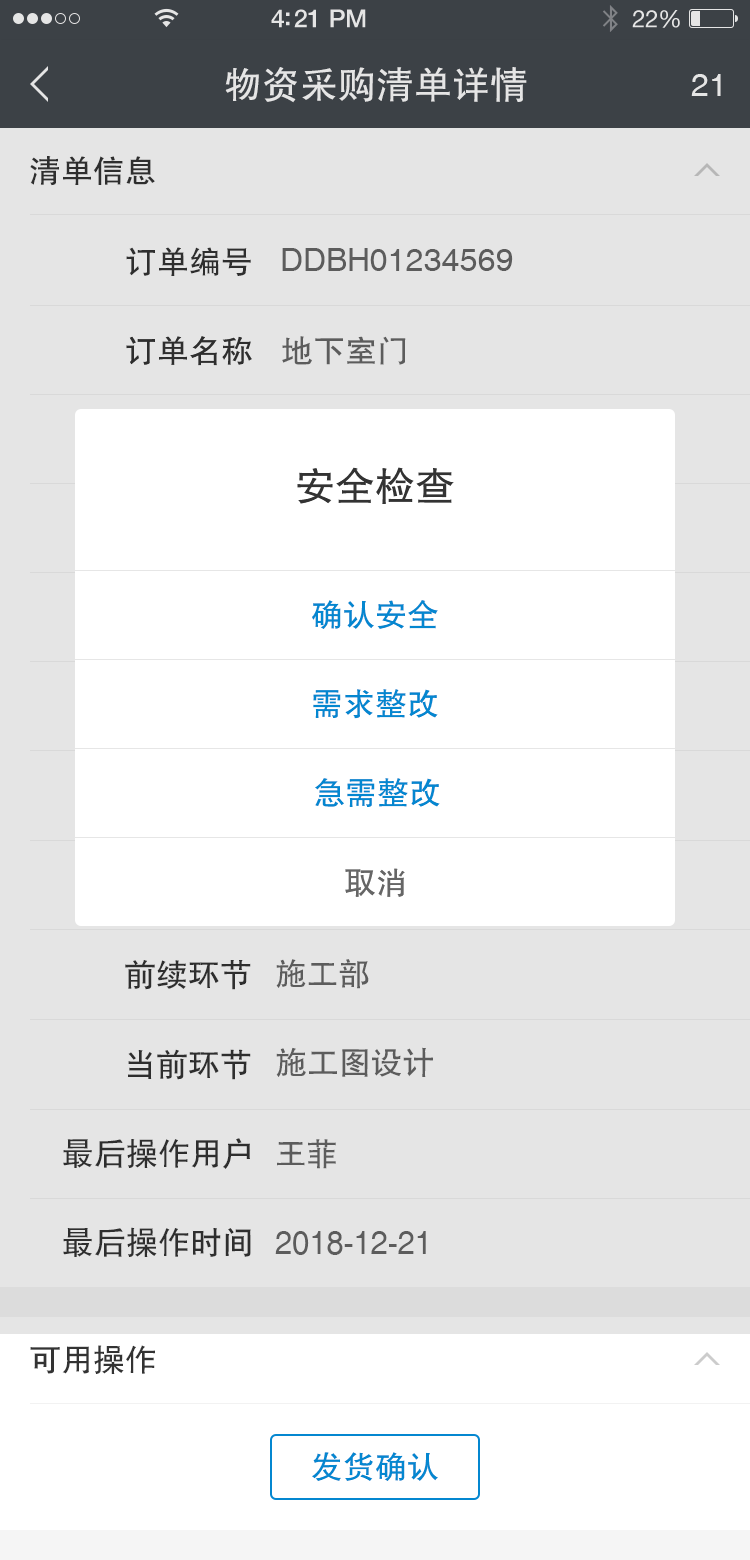
<style>
.page{position:relative;width:750px;height:1560px;background:#e5e5e5}
.page>*{position:absolute;margin:0}
.t1{font:38px "FZHTJW--GB1-0";color:#e5e5e5}
.t2{font:32px "Helvetica";color:#e5e5e5}
.t3{font:32px "FZHTJW--GB1-0";color:#333333}
.t4{font:32px "Helvetica";color:#666666}
.t5{font:32px "FZHTJW--GB1-0";color:#666666}
.t6{font:40px "FZHTJW--GB1-0";color:#333333}
.t7{font:32px "FZHTJW--GB1-0";color:#0487d0}
.t8{font:32.3px "FZHTJW--GB1-0";color:#333333}
.t9{font:32.4px "FZHTJW--GB1-0";color:#333333}
.t10{font:32.4px "FZHTJW--GB1-0";color:#666666}
.t11{font:32.6px "FZHTJW--GB1-0";color:#333333}
.t12{font:32.8px "FZHTJW--GB1-0";color:#333333}
</style>
<div class="page">
<p class="t1" style="left:225px;top:67px;width:302px;height:36px">物资采购清单详情</p>
<p class="t2" style="left:691px;top:74px;width:30px;height:22px">21</p>
<p class="t3" style="left:30px;top:156px;width:125px;height:30px">清单信息</p>
<p class="t3" style="left:126px;top:247px;width:125px;height:29px">订单编号</p>
<p class="t4" style="left:282px;top:248px;width:231px;height:23px">DDBH01234569</p>
<p class="t3" style="left:126px;top:336px;width:126px;height:30px">订单名称</p>
<p class="t5" style="left:282px;top:336px;width:124px;height:29px">地下室门</p>
<p class="t6" style="left:297px;top:467px;width:157px;height:37px">安全检查</p>
<p class="t7" style="left:312px;top:600px;width:126px;height:29px">确认安全</p>
<p class="t7" style="left:313px;top:689px;width:125px;height:30px">需求整改</p>
<p class="t7" style="left:315px;top:778px;width:125px;height:29px">急需整改</p>
<p class="t5" style="left:345px;top:868px;width:60px;height:29px">取消</p>
<p class="t8" style="left:125px;top:960px;width:126px;height:30px">前续环节</p>
<p class="t5" style="left:276px;top:959px;width:93px;height:30px">施工部</p>
<p class="t9" style="left:128px;top:1049px;width:123px;height:31px">当前环节</p>
<p class="t10" style="left:276px;top:1047px;width:157px;height:30px">施工图设计</p>
<p class="t11" style="left:63px;top:1138px;width:187px;height:31px">最后操作用户</p>
<p class="t5" style="left:277px;top:1139px;width:59px;height:30px">王菲</p>
<p class="t12" style="left:63px;top:1227px;width:188px;height:30px">最后操作时间</p>
<p class="t4" style="left:275px;top:1231px;width:151px;height:24px">2018-12-21</p>
<p class="t3" style="left:30px;top:1345px;width:125px;height:29px">可用操作</p>
<p class="t7" style="left:312px;top:1452px;width:126px;height:29px">发货确认</p>
</div>
